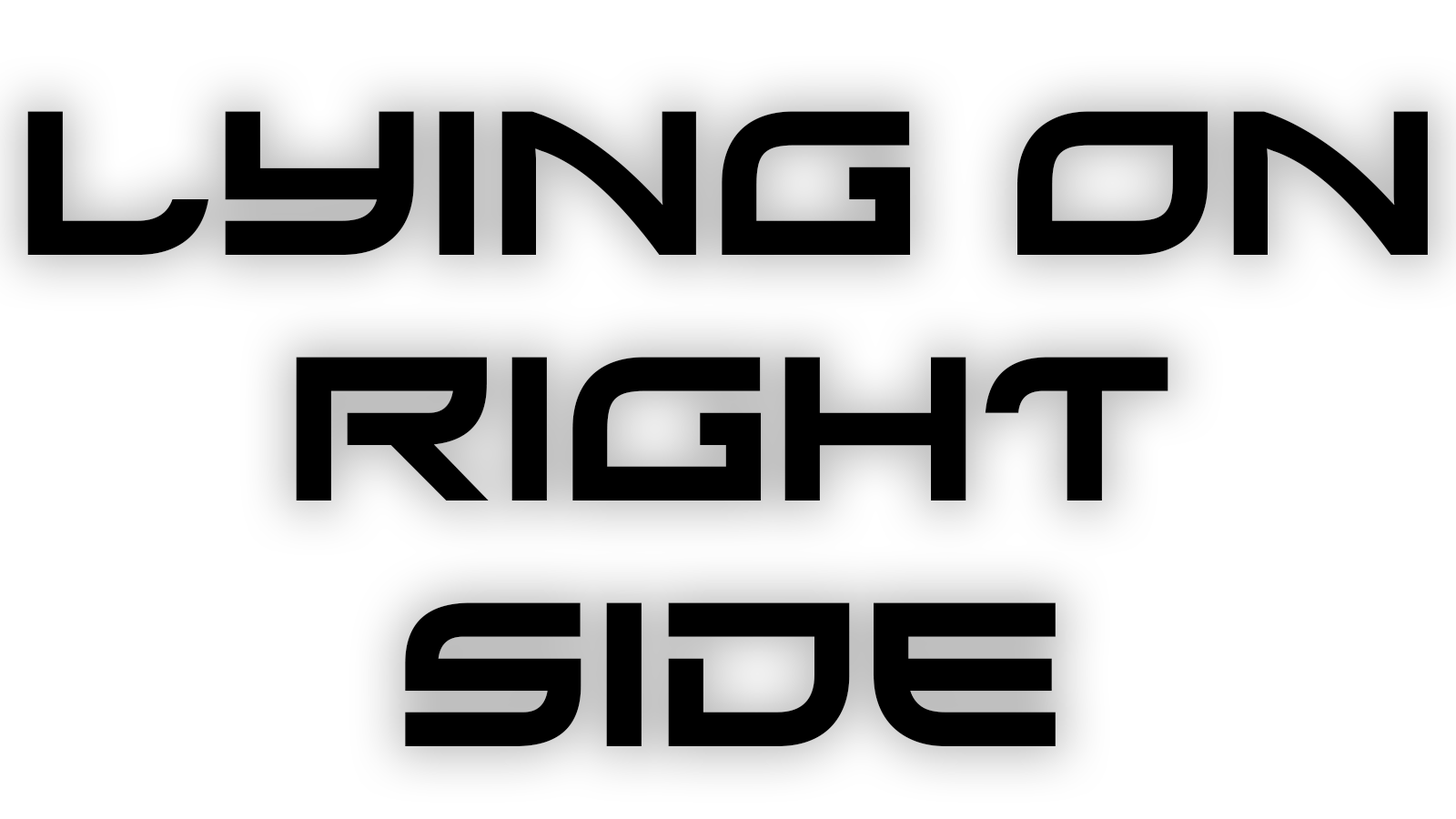
<style>
.page{position:relative;width:1456px;height:819px;background:#ffffff}
.page>*{position:absolute;margin:0}
.t1{font:204.7px "Xirod-Regular";color:#000000}
</style>
<div class="page">
<p class="t1" style="left:27px;top:111px;width:1401px;height:635px;text-align:center">Lying on<br>right<br>side</p>
</div>
